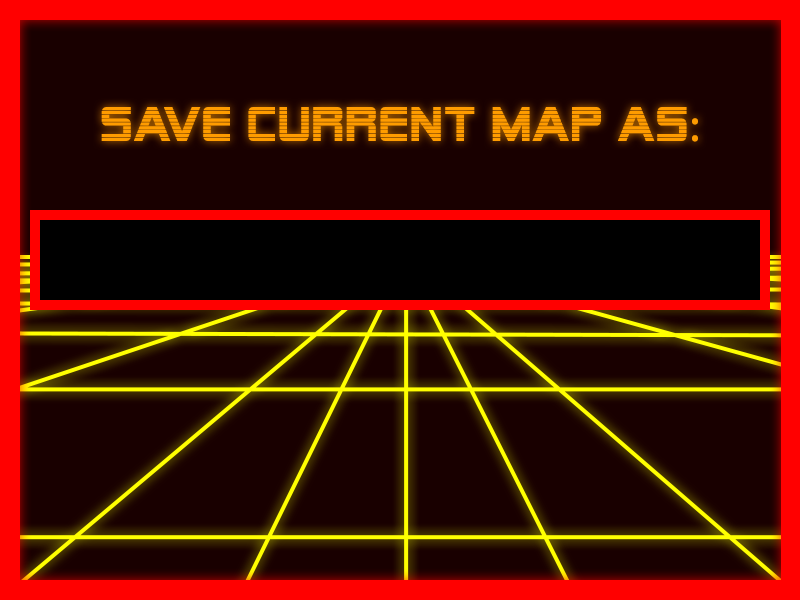
<style>
.page{position:relative;width:800px;height:600px;background:#190000}
.page>*{position:absolute;margin:0}
.t1{font:48px "AlienEncounters";letter-spacing:0.04em;color:#ff9c00}
.t2{font:48px "MyriadPro-Regular";letter-spacing:0.04em;color:#ff9c00}
</style>
<div class="page">
<p class="t1" style="left:101px;top:107px;width:597px;height:35px">save current map as<span class="t2">:</span></p>
</div>
